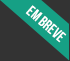
<style>
.page{position:relative;width:70px;height:61px;background:#333333}
.page>*{position:absolute;margin:0}
.t1{font:15px "BebasNeue";color:#ffffff}
</style>
<div class="page">
<p class="t1" style="left:25px;top:5px;width:42px;height:38px;rotate:41deg">em breve</p>
</div>
